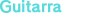
<style>
.page{position:relative;width:100px;height:14px;background:#ffffff}
.page>*{position:absolute;margin:0}
.t1{font:14.8px "RodinProN-DB";color:#59dbdd;font-weight:bold}
</style>
<div class="page">
<p class="t1" style="left:0px;top:0px;width:62px;height:13px">Guitarra</p>
</div>
